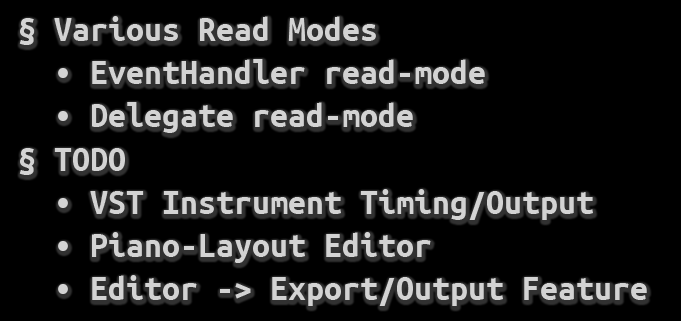
<style>
.page{position:relative;width:681px;height:321px;background:#000000}
.page>*{position:absolute;margin:0}
.t1{font:36px "UbuntuMono-Bold";color:#d3d3d3}
</style>
<div class="page">
<p class="t1" style="left:19px;top:16px;width:628px;height:290px">§ Various Read Modes<br>  • EventHandler read-mode<br>  • Delegate read-mode<br>§ TODO<br>  • VST Instrument Timing/Output<br>  • Piano-Layout Editor<br>  • Editor -&gt; Export/Output Feature</p>
</div>
